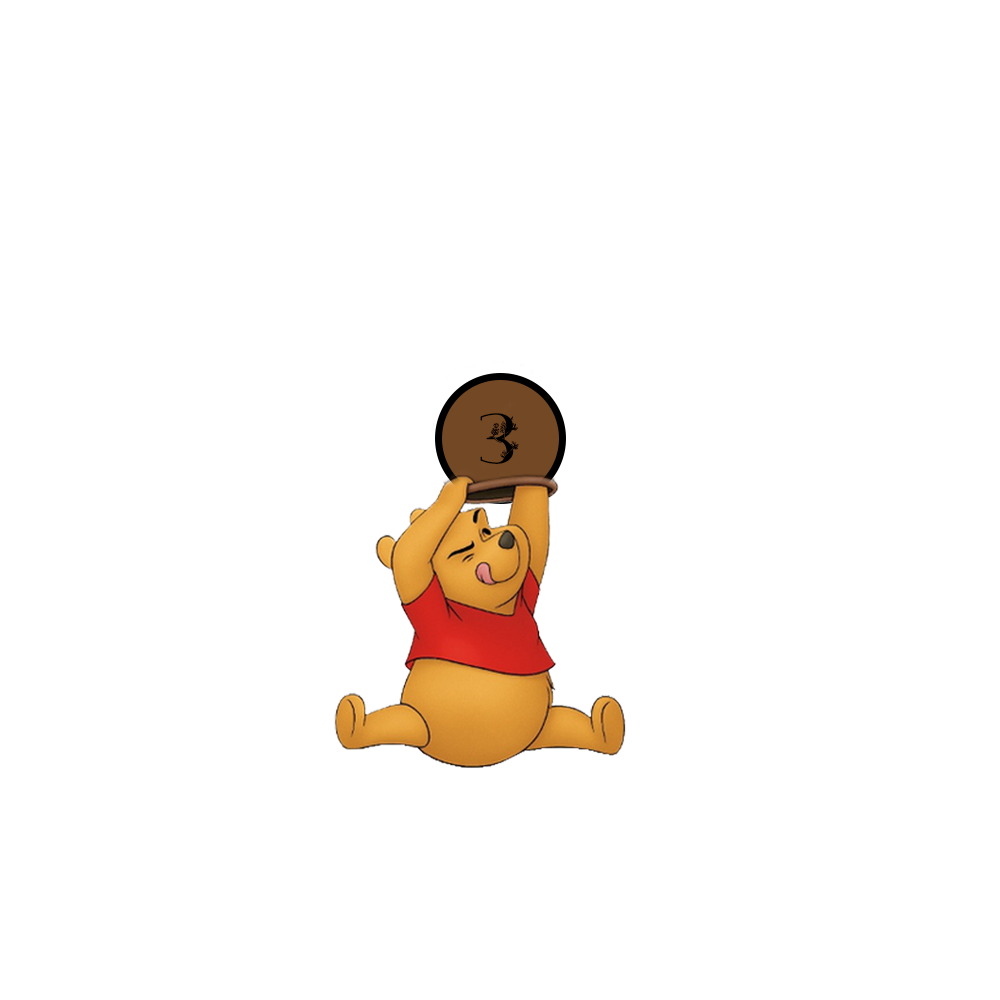
<style>
.page{position:relative;width:1000px;height:1000px;background:#ffffff}
.page>*{position:absolute;margin:0}
.t1{font:75px "Plante";color:#000000}
</style>
<div class="page">
<p class="t1" style="left:480px;top:413px;width:39px;height:51px">3</p>
</div>
